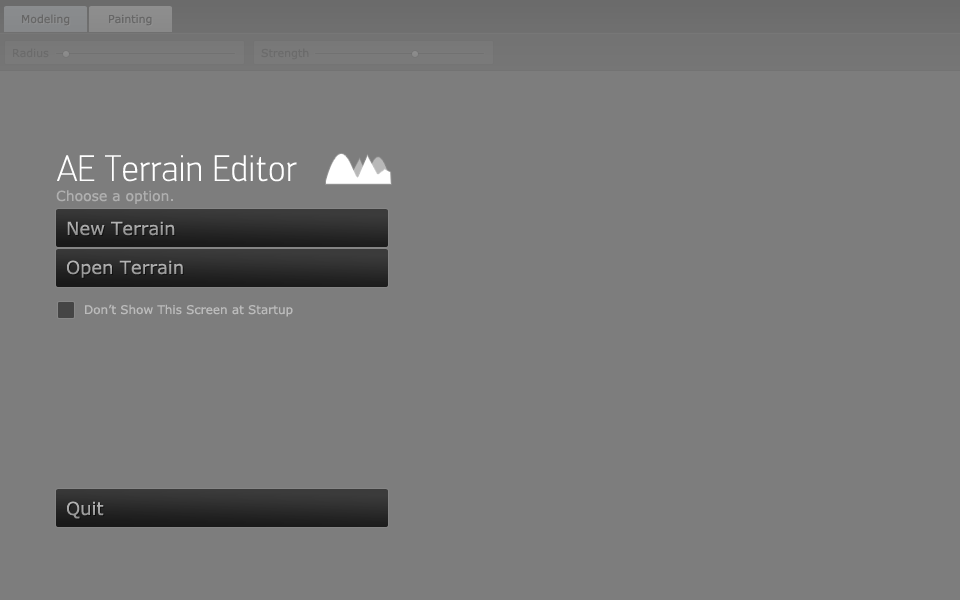
<style>
.page{position:relative;width:960px;height:600px;background:#7d7d7d}
.page>*{position:absolute;margin:0}
.t1{font:11px "Verdana";color:#666666}
.t2{font:11px "Verdana";color:#6b6b6b}
.t3{font:36px "Engel-Lightltd";color:#ffffff}
.t4{font:14px "Verdana";color:#afafaf}
.t5{font:18px "Verdana";color:#a0a0a0}
.t6{font:18px "Verdana";color:#a5a5a5}
.t7{font:12px "Verdana";color:#bbbbbb}
.t8{font:18px "Verdana";color:#a4a4a4}
</style>
<div class="page">
<p class="t1" style="left:22px;top:14px;width:48px;height:12px">Modeling</p>
<p class="t1" style="left:109px;top:14px;width:43px;height:12px">Painting</p>
<p class="t2" style="left:13px;top:48px;width:36px;height:10px">Radius</p>
<p class="t2" style="left:261px;top:48px;width:48px;height:12px">Strength</p>
<p class="t3" style="left:57px;top:155px;width:240px;height:27px">AE Terrain Editor</p>
<p class="t4" style="left:56px;top:190px;width:117px;height:14px">Choose a option.</p>
<p class="t5" style="left:67px;top:221px;width:108px;height:15px">New Terrain</p>
<p class="t6" style="left:67px;top:260px;width:116px;height:18px">Open Terrain</p>
<p class="t7" style="left:85px;top:304px;width:208px;height:13px">Don’t Show This Screen at Startup</p>
<p class="t8" style="left:67px;top:501px;width:37px;height:18px">Quit</p>
</div>
